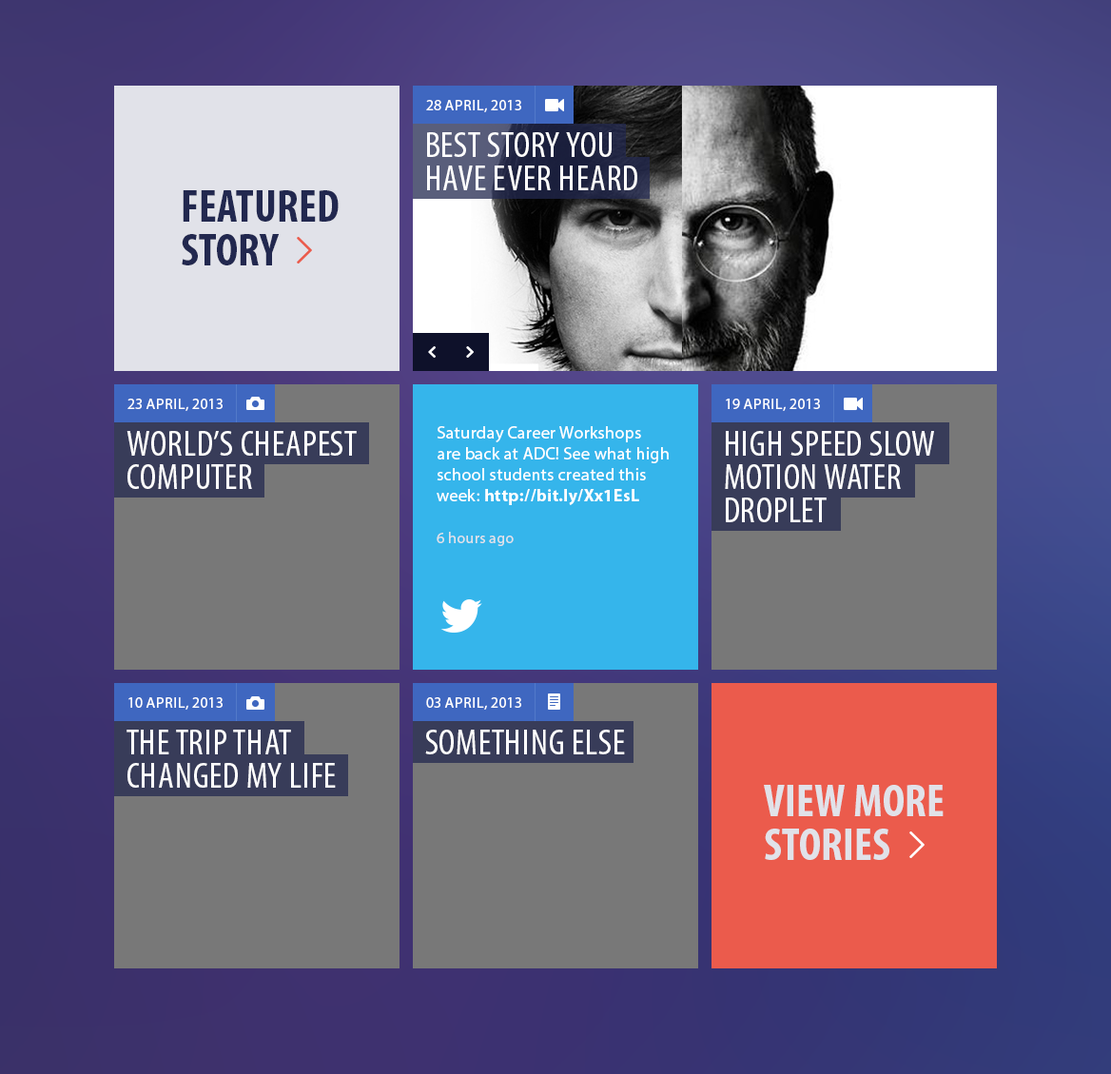
<style>
.page{position:relative;width:1111px;height:1074px}
.page>*{position:absolute;margin:0}
.t1{font:15.2px "MyriadPro-Regular";letter-spacing:0.02em;color:#ffffff}
.t2{font:36.1px/33.3px "MyriadPro-Cond";letter-spacing:0.02em;color:#ffffff}
.t3{font:45.6px/43.7px "MyriadPro-BoldCond";color:#22284f}
.t4{font:36.1px/33.3px "MyriadPro-Cond";letter-spacing:0.02em;color:#ffffff;text-transform:uppercase}
.t5{font:17.1px/20.9px "MyriadPro-Regular";letter-spacing:0.02em;color:#ffffff}
.t6{font:17.1px/20.9px "MyriadPro-Bold";letter-spacing:0.02em;color:#ffffff}
.t7{font:15.2px/20.9px "MyriadPro-Regular";letter-spacing:0.02em;color:#e1e2e9}
.t8{font:36.1px "MyriadPro-Cond";letter-spacing:0.02em;color:#ffffff}
.t9{font:45.6px/43.7px "MyriadPro-BoldCond";color:#e1e2e9}
</style>
<div class="page">
<p class="t1" style="left:426px;top:100px;width:95px;height:12px">28 APRIL, 2013</p>
<p class="t2" style="left:427px;top:132px;width:210px;height:58px">BEST STORY YOU <br>HAVE EVER HEARD</p>
<p class="t3" style="left:182px;top:190px;width:157px;height:75px">FEATURED<br>STORY</p>
<p class="t1" style="left:127px;top:398px;width:96px;height:13px">23 APRIL, 2013</p>
<p class="t1" style="left:726px;top:398px;width:94px;height:13px">19 APRIL, 2013</p>
<p class="t4" style="left:126px;top:431px;width:231px;height:58px">World’s Cheapest <br>Computer</p>
<p class="t5" style="left:436px;top:426px;width:233px;height:120px">Saturday Career Workshops <br>are back at ADC! See what high <br>school students created this <br>week: <span class="t6">http://bit.ly/Xx1EsL<br><br></span><span class="t7">6 hours ago</span></p>
<p class="t4" style="left:725px;top:431px;width:209px;height:91px">HIGH SPEED SLOW<br>MOTION WATER<br>DROPLET</p>
<p class="t1" style="left:128px;top:697px;width:95px;height:12px">10 APRIL, 2013</p>
<p class="t1" style="left:426px;top:697px;width:95px;height:12px">03 APRIL, 2013</p>
<p class="t2" style="left:126px;top:729px;width:210px;height:58px">THE TRIP THAT <br>CHANGED MY LIFE</p>
<p class="t8" style="left:425px;top:729px;width:200px;height:25px">SOMETHING ELSE</p>
<p class="t9" style="left:764px;top:785px;width:179px;height:75px">VIEW MORE<br>STORIES</p>
</div>
